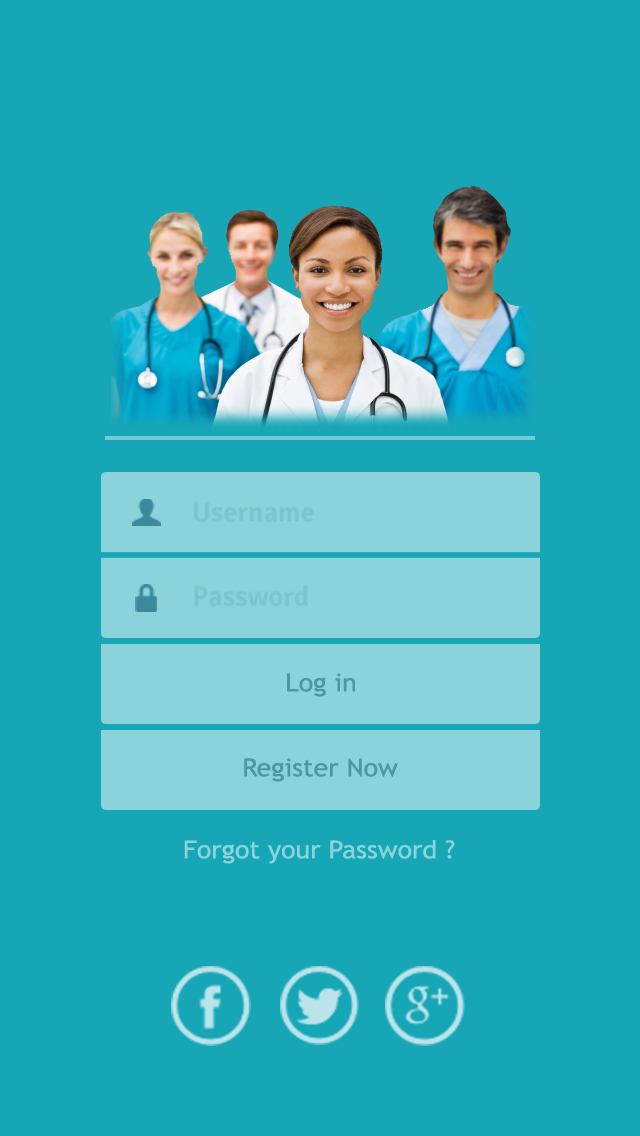
<style>
.page{position:relative;width:640px;height:1136px;background:#17a6b6}
.page>*{position:absolute;margin:0}
.t1{font:27.8px "Signika-Semibold";color:#79c4cf}
.t2{font:24.8px "TrebuchetMS";color:#4f969e;scale:1.08 1}
.t3{font:24.8px "TrebuchetMS";color:#8bd3db;scale:1.08 1}
</style>
<div class="page">
<p class="t1" style="left:194px;top:501px;width:120px;height:22px">Username</p>
<p class="t1" style="left:194px;top:584px;width:114px;height:23px">Password</p>
<p class="t2" style="left:287px;top:673px;width:68px;height:24px">Log in</p>
<p class="t2" style="left:244px;top:758px;width:154px;height:24px">Register Now</p>
<p class="t3" style="left:184px;top:840px;width:271px;height:24px">Forgot your Password ?</p>
</div>
